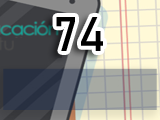
<style>
.page{position:relative;width:160px;height:120px}
.page>*{position:absolute;margin:0}
.t1{font:48px "Bahnschrift";color:#000000}
</style>
<div class="page">
<p class="t1" style="left:56px;top:17px;width:47px;height:34px">74</p>
</div>
